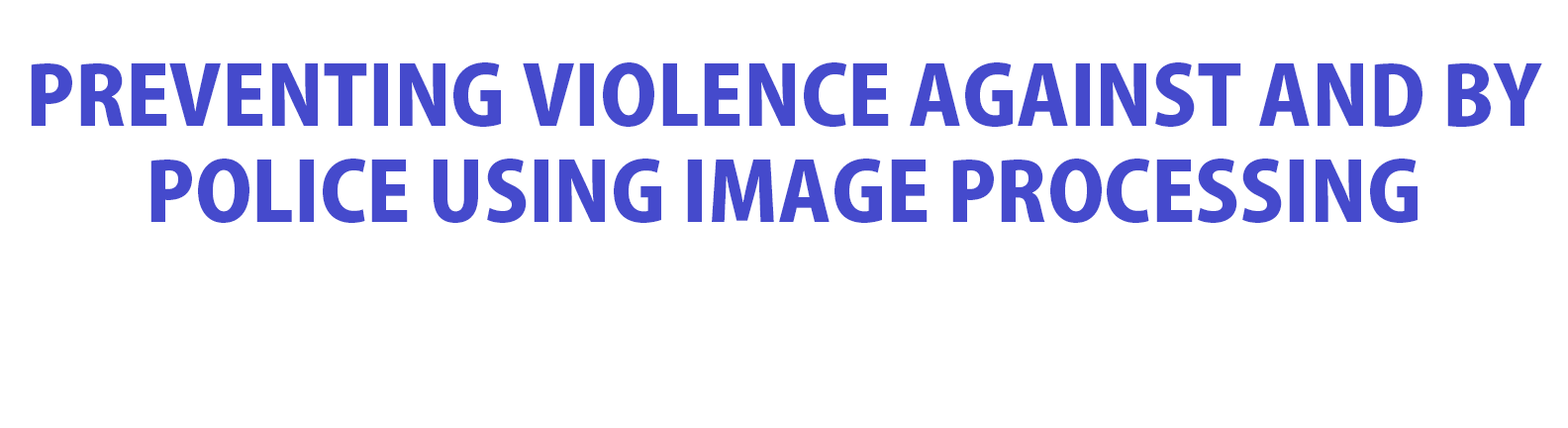
<style>
.page{position:relative;width:1568px;height:428px;background:#ffffff}
.page>*{position:absolute;margin:0}
.t1{font:80.2px "KozGoPr6N-Heavy";color:#454acc}
</style>
<div class="page">
<p class="t1" style="left:31px;top:62px;width:1511px;height:161px;text-align:center">PREVENTING VIOLENCE AGAINST AND BY<br>POLICE USING IMAGE PROCESSING</p>
</div>
